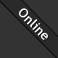
<style>
.page{position:relative;width:58px;height:58px;background:#333333}
.page>*{position:absolute;margin:0}
.t1{font:13px "TrebuchetMS";letter-spacing:0.02em;color:#ffffff}
</style>
<div class="page">
<p class="t1" style="left:18px;top:8px;width:30px;height:32px;rotate:46deg">Online</p>
</div>
